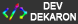
<style>
.page{position:relative;width:78px;height:24px;background:#333333}
.page>*{position:absolute;margin:0}
.t1{font:9px "ArialMT";color:#ffffff;font-weight:bold}
</style>
<div class="page">
<p class="t1" style="left:43px;top:2px;width:20px;height:8px">DEV</p>
<p class="t1" style="left:30px;top:13px;width:46px;height:8px">DEKARON</p>
</div>
